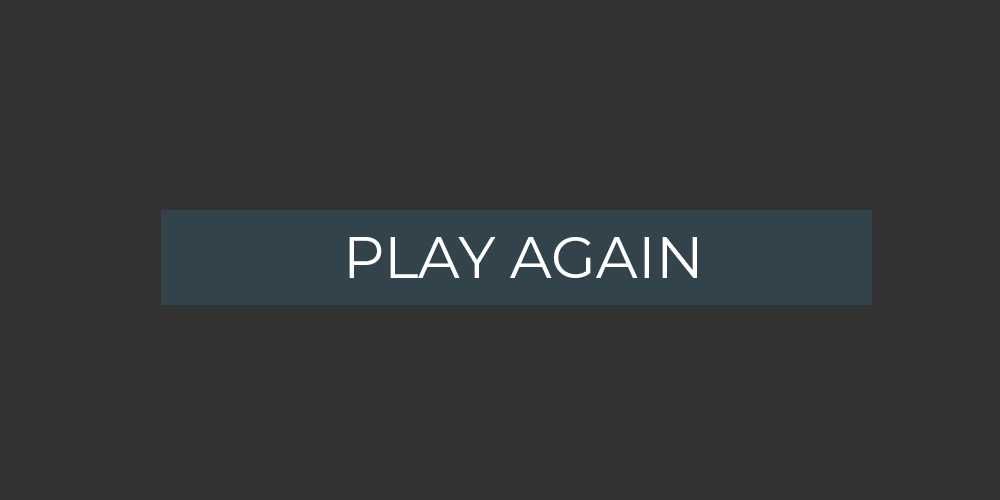
<style>
.page{position:relative;width:1000px;height:500px;background:#333333}
.page>*{position:absolute;margin:0}
.t1{font:58.3px "Montserrat-Regular";color:#ffffff}
</style>
<div class="page">
<p class="t1" style="left:349px;top:237px;width:348px;height:41px">PLAY AGAIN</p>
</div>
